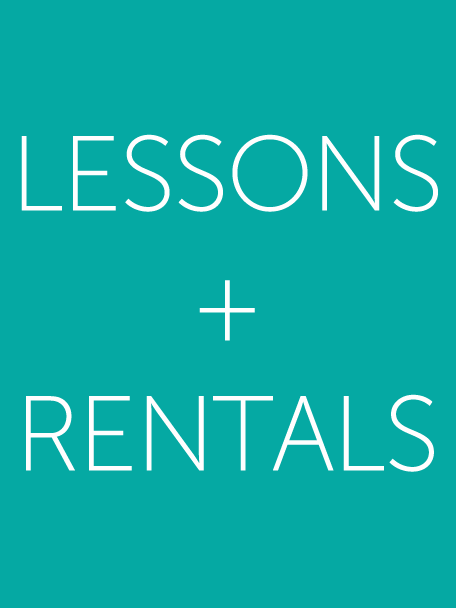
<style>
.page{position:relative;width:456px;height:608px;background:#05a9a3}
.page>*{position:absolute;margin:0}
.t1{font:105.8px/130px "MuseoSans-100";letter-spacing:-0.025em;color:#fffefe}
</style>
<div class="page">
<p class="t1" style="left:21px;top:134px;width:417px;height:338px;text-align:center">LESSONS<br>+<br>RENTALS</p>
</div>
